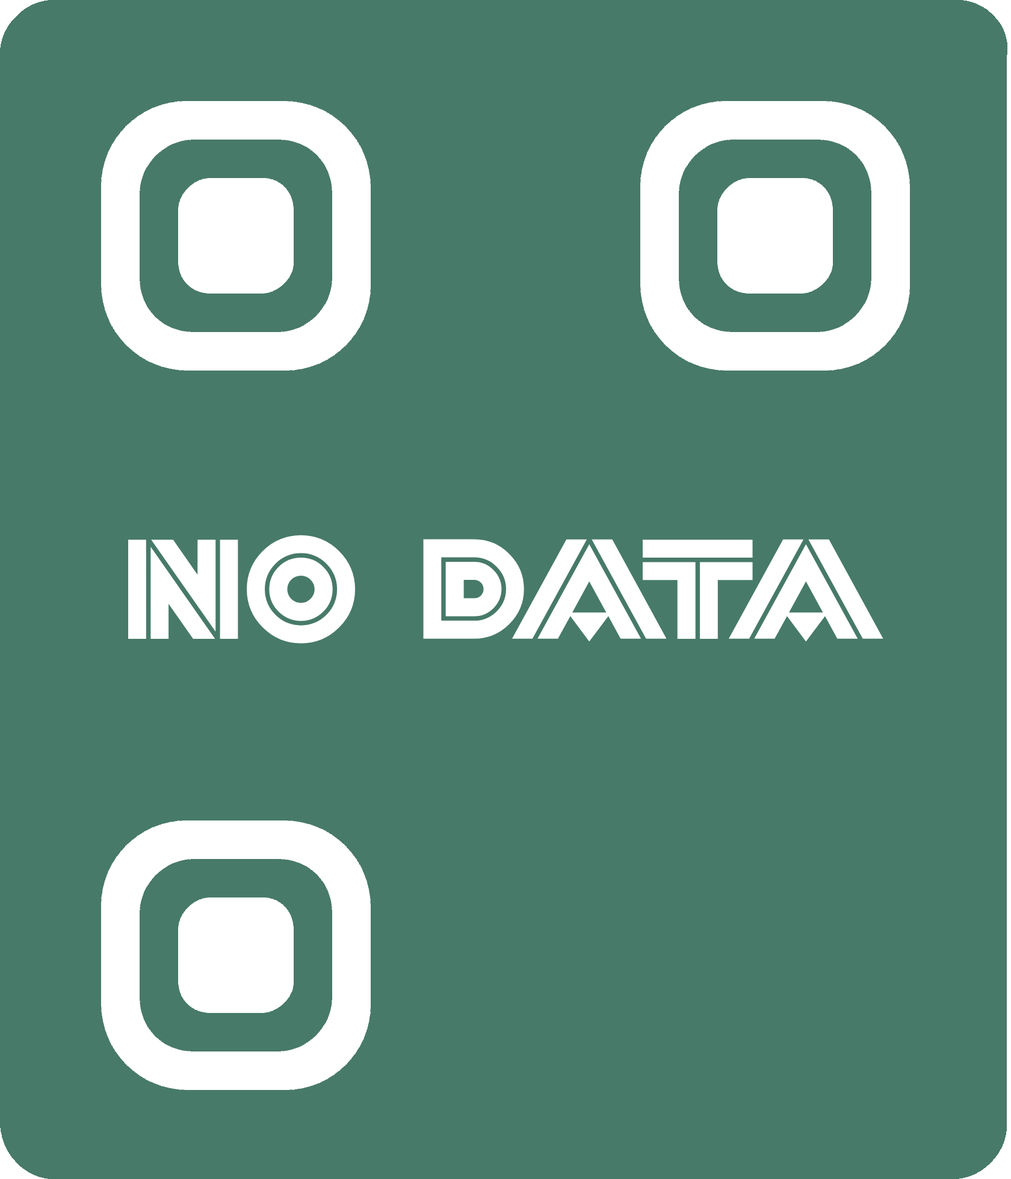
<style>
.page{position:relative;width:1011px;height:1179px;background:#477a69}
.page>*{position:absolute;margin:0}
.t1{font:130.6px "FortySecondStreetHB";color:#ffffff}
</style>
<div class="page">
<p class="t1" style="left:128px;top:535px;width:755px;height:109px">NO DATA</p>
</div>
